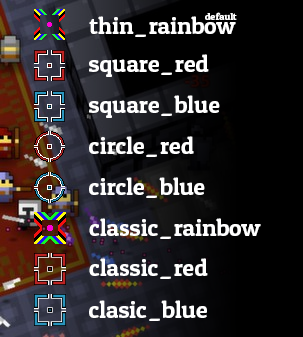
<style>
.page{position:relative;width:303px;height:337px;background:#000000}
.page>*{position:absolute;margin:0}
.t1{font:24px "PatuaOne-Regular";color:#ffffff}
.t2{font:10px "PatuaOne-Regular";color:#ffffff}
</style>
<div class="page">
<p class="t1" style="left:89px;top:16px;width:147px;height:21px">thin_rainbow</p>
<p class="t2" style="left:205px;top:12px;width:32px;height:8px">default</p>
<p class="t1" style="left:89px;top:54px;width:120px;height:23px">square_red</p>
<p class="t1" style="left:89px;top:95px;width:131px;height:23px">square_blue</p>
<p class="t1" style="left:89px;top:136px;width:105px;height:21px">circle_red</p>
<p class="t1" style="left:89px;top:177px;width:116px;height:21px">circle_blue</p>
<p class="t1" style="left:89px;top:218px;width:172px;height:21px">classic_rainbow</p>
<p class="t1" style="left:89px;top:258px;width:119px;height:21px">classic_red</p>
<p class="t1" style="left:89px;top:300px;width:118px;height:21px">clasic_blue</p>
</div>
